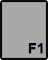
<style>
.page{position:relative;width:48px;height:60px;background:#a9a9a9}
.page>*{position:absolute;margin:0}
.t1{font:14px "Arial-BoldMT";color:#000015;font-weight:bold}
</style>
<div class="page">
<p class="t1" style="left:28px;top:43px;width:15px;height:11px">F1</p>
</div>
